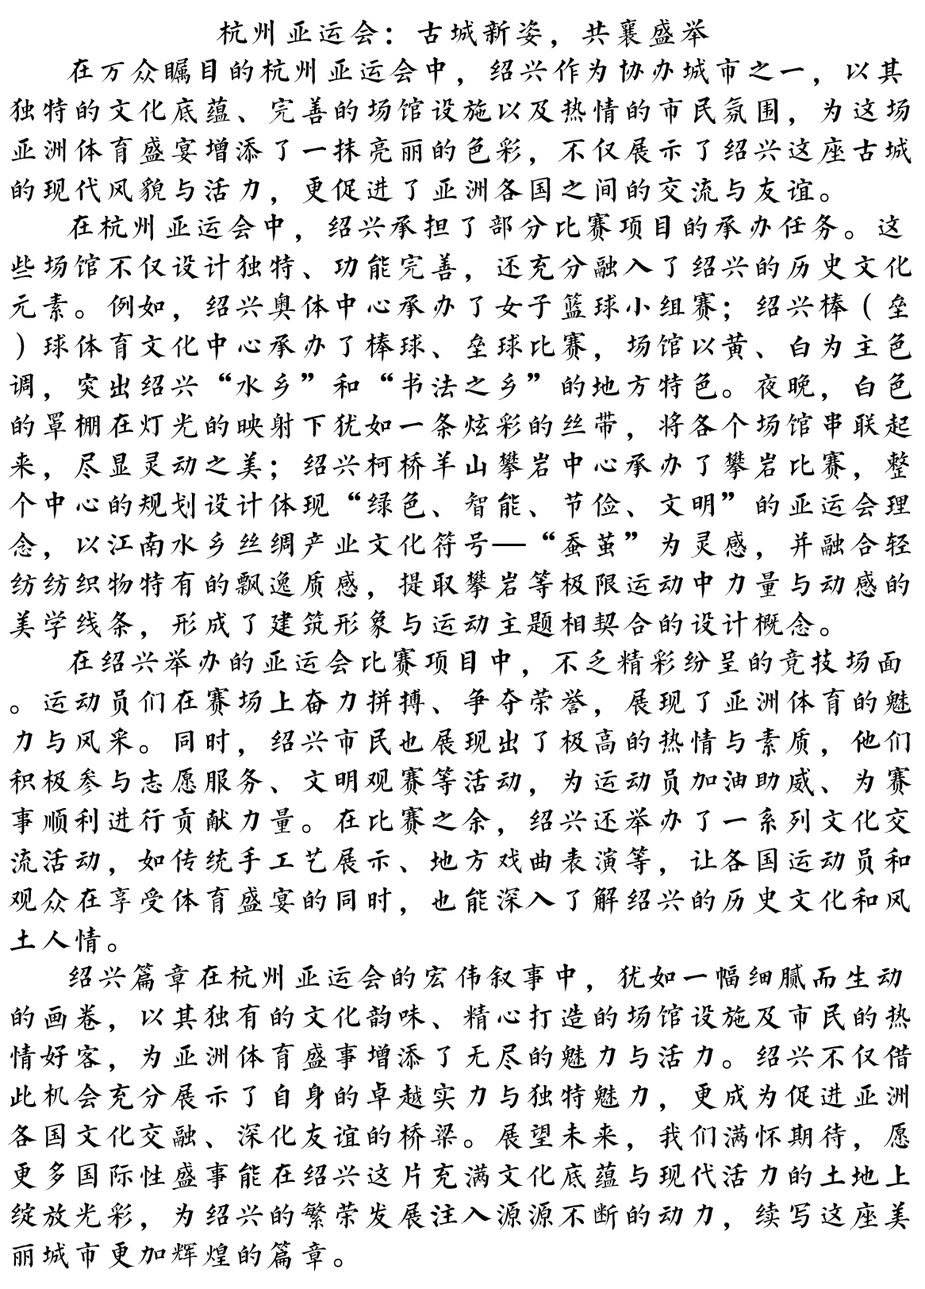
<style>
.page{position:relative;width:925px;height:1289px;background:#ffffff}
.page>*{position:absolute;margin:0}
.t1{font:33.1px "ZKTQINGKS--GB1-0";color:#000000}
</style>
<div class="page">
<p class="t1" style="left:8px;top:18px;width:905px;height:1253px;text-align:center">杭州亚运会：古城新姿，共襄盛举<br>  在万众瞩目的杭州亚运会中，绍兴作为协办城市之一，以其独特的文化底蕴、完善的场馆设施以及热情的市民氛围，为这场亚洲体育盛宴增添了一抹亮丽的色彩，不仅展示了绍兴这座古城的现代风貌与活力，更促进了亚洲各国之间的交流与友谊。<br>  在杭州亚运会中，绍兴承担了部分比赛项目的承办任务。这些场馆不仅设计独特、功能完善，还充分融入了绍兴的历史文化元素。例如，绍兴奥体中心承办了女子篮球小组赛；绍兴棒（垒）球体育文化中心承办了棒球、垒球比赛，场馆以黄、白为主色调，突出绍兴“水乡”和“书法之乡”的地方特色。夜晚，白色的罩棚在灯光的映射下犹如一条炫彩的丝带，将各个场馆串联起来，尽显灵动之美；绍兴柯桥羊山攀岩中心承办了攀岩比赛，整个中心的规划设计体现“绿色、智能、节俭、文明”的亚运会理念，以江南水乡丝绸产业文化符号—“蚕茧”为灵感，并融合轻纺纺织物特有的飘逸质感，提取攀岩等极限运动中力量与动感的美学线条，形成了建筑形象与运动主题相契合的设计概念。<br>  在绍兴举办的亚运会比赛项目中，不乏精彩纷呈的竞技场面。运动员们在赛场上奋力拼搏、争夺荣誉，展现了亚洲体育的魅力与风采。同时，绍兴市民也展现出了极高的热情与素质，他们积极参与志愿服务、文明观赛等活动，为运动员加油助威、为赛事顺利进行贡献力量。在比赛之余，绍兴还举办了一系列文化交流活动，如传统手工艺展示、地方戏曲表演等，让各国运动员和观众在享受体育盛宴的同时，也能深入了解绍兴的历史文化和风土人情。<br>  绍兴篇章在杭州亚运会的宏伟叙事中，犹如一幅细腻而生动的画卷，以其独有的文化韵味、精心打造的场馆设施及市民的热情好客，为亚洲体育盛事增添了无尽的魅力与活力。绍兴不仅借此机会充分展示了自身的卓越实力与独特魅力，更成为促进亚洲各国文化交融、深化友谊的桥梁。展望未来，我们满怀期待，愿更多国际性盛事能在绍兴这片充满文化底蕴与现代活力的土地上绽放光彩，为绍兴的繁荣发展注入源源不断的动力，续写这座美丽城市更加辉煌的篇章。</p>
</div>
